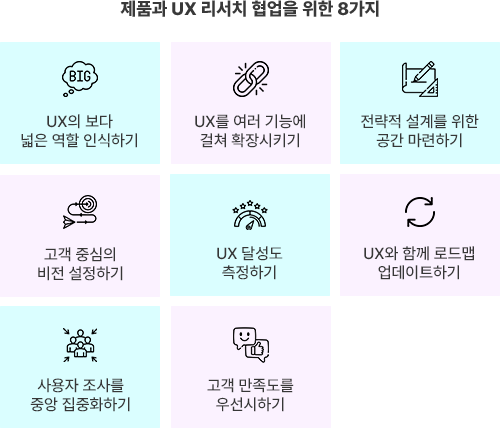
<style>
.page{position:relative;width:500px;height:428px;background:#dafeff}
.page>*{position:absolute;margin:0}
.t1{font:18px "Pretendard-ExtraBold";color:#393939;text-transform:uppercase}
.t2{font:16px "Pretendard-Medium";color:#373737;text-transform:uppercase}
</style>
<div class="page">
<p class="t1" style="left:120px;top:0px;width:259px;height:17px">제품과 UX 리서치 협업을 위한 8가지</p>
<p class="t2" style="left:21px;top:114px;width:116px;height:34px;text-align:center">UX의 보다<br>넓은 역할 인식하기</p>
<p class="t2" style="left:195px;top:114px;width:110px;height:34px;text-align:center">UX를 여러 기능에<br>걸쳐 확장시키기</p>
<p class="t2" style="left:361px;top:114px;width:118px;height:34px;text-align:center">전략적 설계를 위한<br>공간 마련하기</p>
<p class="t2" style="left:217px;top:246px;width:66px;height:34px;text-align:center">UX 달성도<br>측정하기</p>
<p class="t2" style="left:364px;top:246px;width:110px;height:34px;text-align:center">UX와 함께 로드맵<br>업데이트하기</p>
<p class="t2" style="left:38px;top:247px;width:85px;height:34px;text-align:center">고객 중심의<br>비전 설정하기</p>
<p class="t2" style="left:30px;top:378px;width:100px;height:34px;text-align:center">사용자 조사를<br>중앙 집중화하기</p>
<p class="t2" style="left:207px;top:378px;width:87px;height:34px;text-align:center">고객 만족도를<br>우선시하기</p>
</div>
